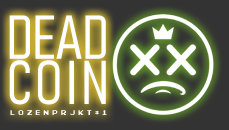
<style>
.page{position:relative;width:229px;height:130px}
.page>*{position:absolute;margin:0}
.t1{font:61.1px/45.3px "Bahnschrift-LightCondensed";color:#ffffff}
.t2{font:61.1px/45.3px "Bahnschrift-LightCondensed";letter-spacing:0.065em;color:#ffffff}
.t3{font:7.1px "PixelEmulator";letter-spacing:0.45em;color:#ffffff}
</style>
<div class="page">
<p class="t1" style="left:9px;top:15px;width:97px;height:90px">DEAD<br><span class="t2">COIN</span></p>
<p class="t3" style="left:10px;top:110px;width:97px;height:5px">LOZENPRJKT#1</p>
</div>
